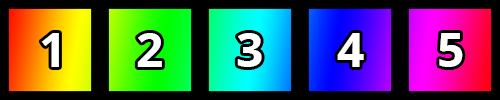
<style>
.page{position:relative;width:500px;height:100px;background:#000000}
.page>*{position:absolute;margin:0}
.t1{font:48px "OpenSans-Bold";color:#fefefe}
</style>
<div class="page">
<p class="t1" style="left:41px;top:33px;width:18px;height:34px">1</p>
<p class="t1" style="left:137px;top:33px;width:25px;height:34px">2</p>
<p class="t1" style="left:237px;top:33px;width:25px;height:34px">3</p>
<p class="t1" style="left:337px;top:33px;width:27px;height:34px">4</p>
<p class="t1" style="left:439px;top:33px;width:24px;height:34px">5</p>
</div>
